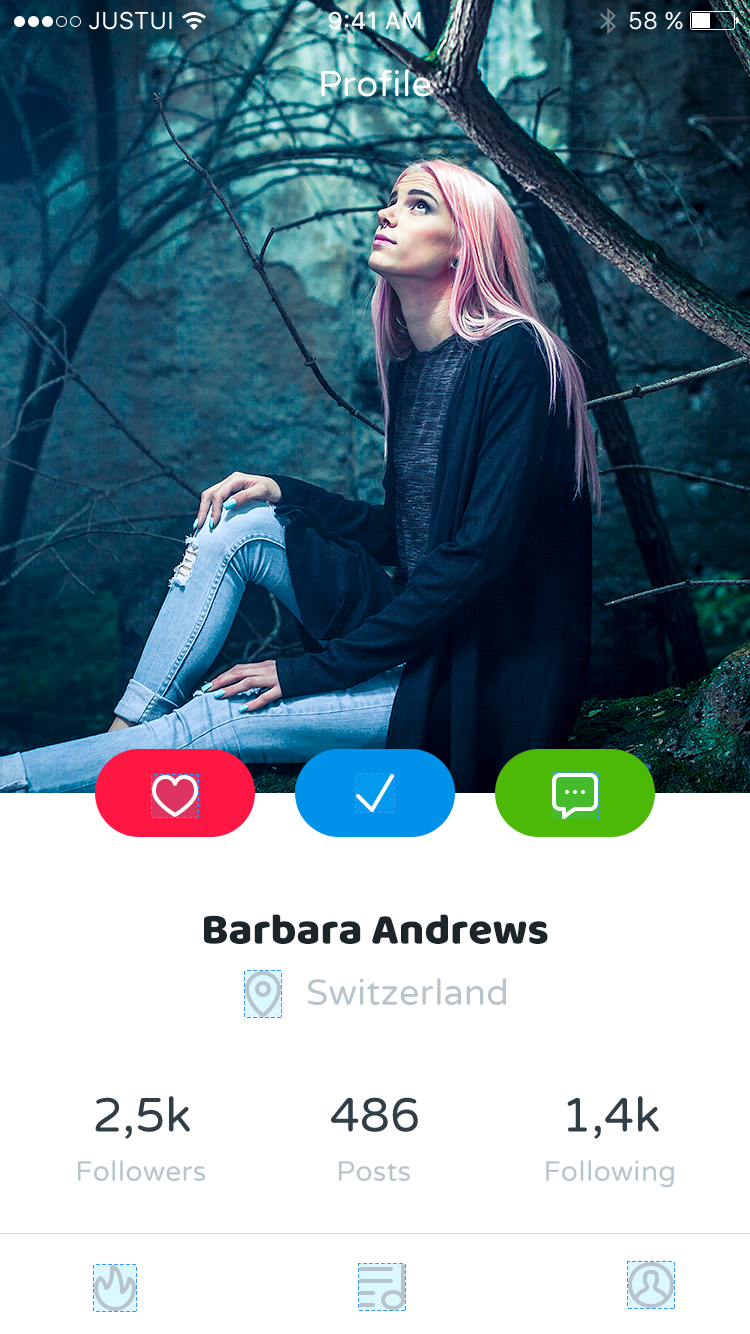
<style>
.page{position:relative;width:750px;height:1334px;background:#ffffff}
.page>*{position:absolute;margin:0}
.t1{font:24px "SFUIText-Regular";color:#ffffff}
.t2{font:24px "SFUIText-Medium";color:#ffffff}
.t3{font:36px "VarelaRound-Regular";letter-spacing:0.008em;color:#ffffff}
.t4{font:44px "BalooBhai-Regular";color:#1c252a}
.t5{font:36px "VarelaRound-Regular";letter-spacing:0.008em;color:#b7c4cb}
.t6{font:48px "VarelaRound-Regular";color:#323e46}
.t7{font:28px "VarelaRound-Regular";letter-spacing:0.012em;color:#b7c4cb}
</style>
<div class="page">
<p class="t1" style="left:89px;top:11px;width:83px;height:19px">JUSTUI</p>
<p class="t2" style="left:328px;top:11px;width:93px;height:19px">9:41 AM</p>
<p class="t1" style="left:629px;top:11px;width:54px;height:19px">58 %</p>
<p class="t3" style="left:321px;top:69px;width:110px;height:28px">Profile</p>
<p class="t4" style="left:204px;top:914px;width:344px;height:30px">Barbara Andrews</p>
<p class="t5" style="left:307px;top:978px;width:199px;height:27px">Switzerland</p>
<p class="t6" style="left:95px;top:1096px;width:95px;height:43px">2,5k</p>
<p class="t6" style="left:331px;top:1097px;width:87px;height:35px">486</p>
<p class="t6" style="left:567px;top:1096px;width:92px;height:43px">1,4k</p>
<p class="t7" style="left:78px;top:1160px;width:127px;height:21px">Followers</p>
<p class="t7" style="left:339px;top:1161px;width:71px;height:20px">Posts</p>
<p class="t7" style="left:546px;top:1160px;width:128px;height:28px">Following</p>
</div>
